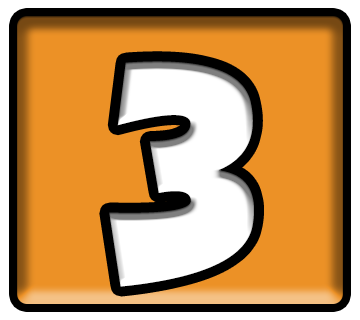
<style>
.page{position:relative;width:360px;height:320px;background:#ec9126}
.page>*{position:absolute;margin:0}
.t1{font:303.3px "Funhouse";color:#ffffff;scale:0.91 1}
</style>
<div class="page">
<p class="t1" style="left:109px;top:61px;width:145px;height:226px">3</p>
</div>
